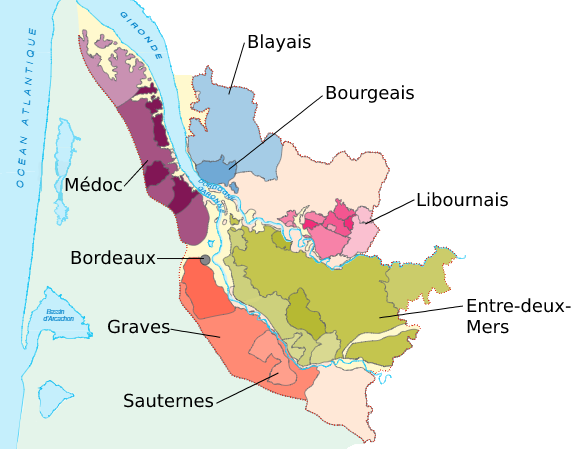
<style>
.page{position:relative;width:578px;height:449px;background:#ffffff}
.page>*{position:absolute;margin:0}
.t1{font:18px "DejaVuSans";color:#000000}
</style>
<div class="page">
<p class="t1" style="left:248px;top:34px;width:63px;height:18px">Blayais</p>
<p class="t1" style="left:326px;top:85px;width:88px;height:18px">Bourgeais</p>
<p class="t1" style="left:65px;top:176px;width:57px;height:16px">Médoc</p>
<p class="t1" style="left:417px;top:192px;width:91px;height:15px">Libournais</p>
<p class="t1" style="left:71px;top:250px;width:85px;height:15px">Bordeaux</p>
<p class="t1" style="left:467px;top:298px;width:104px;height:36px">Entre-deux-<br>Mers</p>
<p class="t1" style="left:108px;top:319px;width:62px;height:15px">Graves</p>
<p class="t1" style="left:124px;top:393px;width:90px;height:15px">Sauternes</p>
</div>
